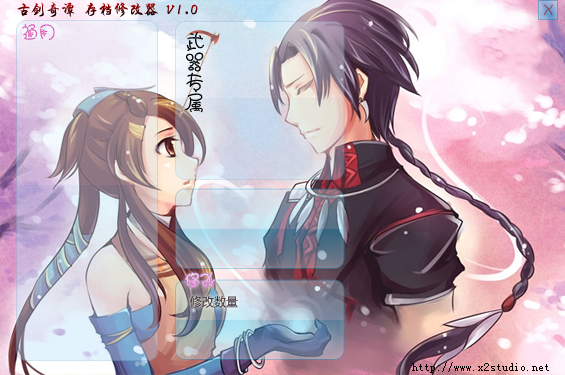
<style>
.page{position:relative;width:565px;height:375px}
.page>*{position:absolute;margin:0}
.t1{font:15px "HYi4gj"}
.t2{font:12px "KristenITC-Regular";color:#914b62}
.t3{font:17.5px "HYj2gj";color:#e068ba}
.t4{font:15px "HYj2gj";color:#fac6de}
.t5{font:12px "MicrosoftYaHei";color:#413340}
.t6{font:12px "SimSun";color:#000000}
</style>
<div class="page">
<p class="t1" style="left:17px;top:2px;width:181px;height:15px">古剑奇谭 存档修改器 V1.0</p>
<p class="t2" style="left:543px;top:4px;width:10px;height:12px">X</p>
<p class="t3" style="left:22px;top:24px;width:33px;height:16px">通用</p>
<p class="t4" style="left:185px;top:272px;width:30px;height:15px">修改</p>
<p class="t5" style="left:190px;top:296px;width:48px;height:12px">修改数量</p>
<p class="t6" style="left:412px;top:362px;width:137px;height:11px">http://www.x2studio.net</p>
</div>
